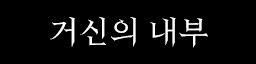
<style>
.page{position:relative;width:256px;height:64px;background:#000000}
.page>*{position:absolute;margin:0}
.t1{font:30px "HeirofLightRegular";letter-spacing:0.025em;color:#ffffff}
</style>
<div class="page">
<p class="t1" style="left:50px;top:16px;width:158px;height:32px">거신의 내부</p>
</div>
